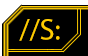
<style>
.page{position:relative;width:88px;height:56px;background:#000000}
.page>*{position:absolute;margin:0}
.t1{font:30px "MyriadPro-Regular";color:#ffcc00}
</style>
<div class="page">
<p class="t1" style="left:19px;top:19px;width:41px;height:22px">//S:</p>
</div>
